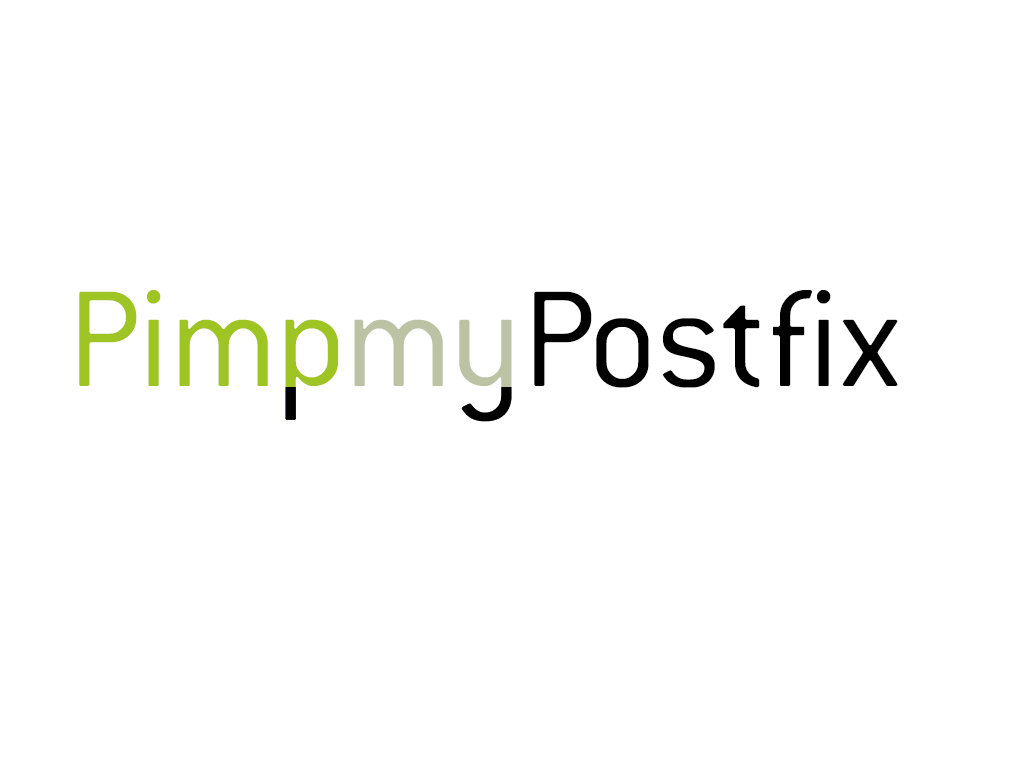
<style>
.page{position:relative;width:1024px;height:768px;background:#ffffff}
.page>*{position:absolute;margin:0}
.t1{font:150px "ConduitITCTTLight";color:#000000}
.t2{font:150px "ConduitITCTTLight";color:#9fc525}
.t3{font:150px "ConduitITCTTLight";color:#bcc3a5}
</style>
<div class="page">
<p class="t1" style="left:79px;top:290px;width:819px;height:132px"><span class="t2">Pimp</span><span class="t3">my</span>Postfix</p>
</div>
